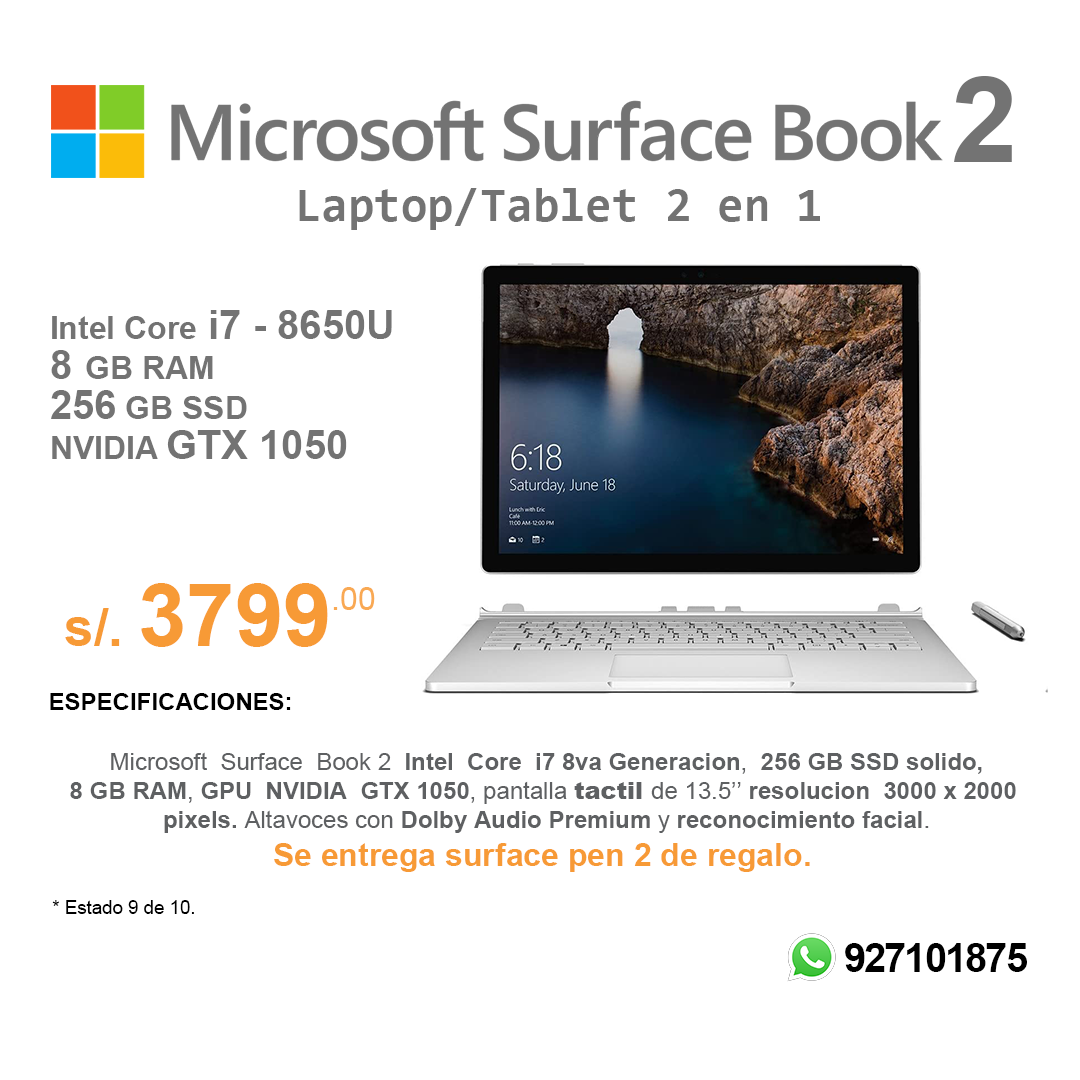
<style>
.page{position:relative;width:1080px;height:1080px;background:#ffffff}
.page>*{position:absolute;margin:0}
.t1{font:120px "Arial-BoldMT";letter-spacing:-0.05em;color:#737373}
.t2{font:48px "Consolas-Bold";color:#737373}
.t3{font:40px/40px "Arial-BoldMT";color:#737373}
.t4{font:32px/40px "Arial-BoldMT";color:#737373}
.t5{font:86.7px "Arial-BoldMT";color:#f79a36}
.t6{font:53.3px "Arial-BoldMT";color:#f79a36}
.t7{font:32px "ArialMT";color:#f9a953}
.t8{font:24px "Arial-BoldMT";color:#000000}
.t9{font:32px "Arial-BoldMT";color:#f79a36}
.t10{font:24px "ArialMT";color:#5e6062}
.t11{font:24px "Arial-BoldMT";color:#5e6062}
.t12{font:24px "Arial-Black";color:#5e6062}
.t13{font:18.7px "ArialMT";color:#000000}
.t14{font:40px "Arial-BoldMT";letter-spacing:-0.05em;color:#000000}
</style>
<div class="page">
<p class="t1" style="left:954px;top:76px;width:58px;height:86px">2</p>
<p class="t2" style="left:299px;top:188px;width:521px;height:42px">Laptop/Tablet 2 en 1</p>
<p class="t3" style="left:51px;top:310px;width:341px;height:149px"><span class="t4">Intel Core</span> i7 - 8650U <br>8 <span class="t4">GB RAM <br></span>256<span class="t4"> GB SSD<br>NVIDIA </span>GTX 1050</p>
<p class="t5" style="left:65px;top:583px;width:263px;height:64px"><span class="t6">s/. </span>3799</p>
<p class="t7" style="left:333px;top:587px;width:42px;height:23px">.00</p>
<p class="t8" style="left:50px;top:693px;width:241px;height:17px">ESPECIFICACIONES:</p>
<p class="t9" style="left:70px;top:752px;width:946px;height:120px;text-align:center"><span class="t10">Microsoft  Surface  Book 2  </span><span class="t11">Intel  Core  i7 8va Generacion</span><span class="t10">,  </span><span class="t11">256 GB SSD solido,<br>8 GB RAM</span><span class="t10">, </span><span class="t11">GPU  NVIDIA  GTX 1050</span><span class="t10">, pantalla </span><span class="t12">tactil </span><span class="t10">de 13.5’’ </span><span class="t11">resolucion  3000 x 2000 <br>pixels. </span><span class="t10">Altavoces con </span><span class="t11">Dolby Audio Premium</span><span class="t10"> y </span><span class="t11">reconocimiento facial</span><span class="t10">.<br></span>Se entrega surface pen 2 de regalo.</p>
<p class="t13" style="left:52px;top:900px;width:142px;height:14px">* Estado 9 de 10.</p>
<p class="t14" style="left:845px;top:943px;width:182px;height:29px">927101875</p>
</div>
